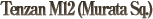
<style>
.page{position:relative;width:153px;height:19px;background:#ffffff}
.page>*{position:absolute;margin:0}
.t1{font:18px "RyuminPro-ExBold";letter-spacing:-0.12em;color:#4a3f32;font-weight:bold;scale:0.85 1}
</style>
<div class="page">
<p class="t1" style="left:0px;top:1px;width:153px;height:18px">Tenzan M12 (Murata Sq.)</p>
</div>
